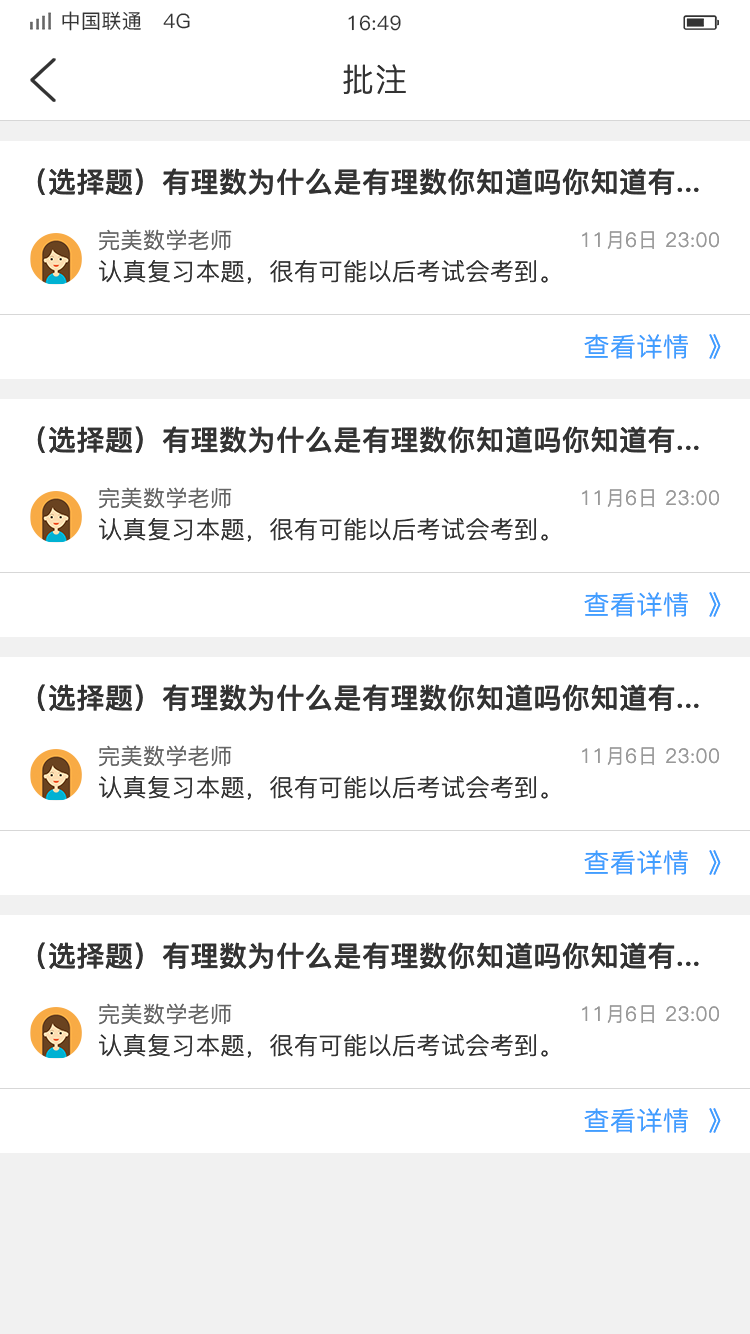
<style>
.page{position:relative;width:750px;height:1334px;background:#ffffff}
.page>*{position:absolute;margin:0}
.t1{font:20px "PingFang-SC-Medium";letter-spacing:0.02em;color:#333333}
.t2{font:32px "PingFang-SC-Regular";letter-spacing:0.02em;color:#333333}
.t3{font:28px "PingFang-SC-Bold";letter-spacing:0.02em;color:#333333}
.t4{font:22px "PingFang-SC-Regular";letter-spacing:0.02em;color:#666666}
.t5{font:20px "PingFang-SC-Regular";letter-spacing:0.02em;color:#999999}
.t6{font:24px "PingFang-SC-Regular";letter-spacing:0.02em;color:#333333}
.t7{font:26px "PingFang-SC-Regular";letter-spacing:0.02em;color:#409eff}
</style>
<div class="page">
<p class="t1" style="left:62px;top:11px;width:128px;height:20px">中国联通   4G</p>
<p class="t1" style="left:348px;top:15px;width:53px;height:16px">16:49</p>
<p class="t2" style="left:343px;top:64px;width:63px;height:30px">批注</p>
<p class="t3" style="left:37px;top:168px;width:662px;height:27px">（选择题）有理数为什么是有理数你知道吗你知道有...</p>
<p class="t4" style="left:99px;top:229px;width:133px;height:22px">完美数学老师</p>
<p class="t5" style="left:582px;top:231px;width:137px;height:18px">11月6日 23:00</p>
<p class="t6" style="left:99px;top:260px;width:449px;height:24px">认真复习本题，很有可能以后考试会考到。</p>
<p class="t7" style="left:584px;top:334px;width:137px;height:25px">查看详情  》</p>
<p class="t3" style="left:37px;top:426px;width:662px;height:27px">（选择题）有理数为什么是有理数你知道吗你知道有...</p>
<p class="t4" style="left:99px;top:487px;width:133px;height:22px">完美数学老师</p>
<p class="t5" style="left:582px;top:489px;width:137px;height:18px">11月6日 23:00</p>
<p class="t6" style="left:99px;top:518px;width:449px;height:24px">认真复习本题，很有可能以后考试会考到。</p>
<p class="t7" style="left:584px;top:592px;width:137px;height:25px">查看详情  》</p>
<p class="t3" style="left:37px;top:684px;width:662px;height:27px">（选择题）有理数为什么是有理数你知道吗你知道有...</p>
<p class="t4" style="left:99px;top:745px;width:133px;height:22px">完美数学老师</p>
<p class="t5" style="left:582px;top:747px;width:137px;height:18px">11月6日 23:00</p>
<p class="t6" style="left:99px;top:776px;width:449px;height:24px">认真复习本题，很有可能以后考试会考到。</p>
<p class="t7" style="left:584px;top:850px;width:137px;height:25px">查看详情  》</p>
<p class="t3" style="left:37px;top:942px;width:662px;height:27px">（选择题）有理数为什么是有理数你知道吗你知道有...</p>
<p class="t4" style="left:99px;top:1003px;width:133px;height:22px">完美数学老师</p>
<p class="t5" style="left:582px;top:1005px;width:137px;height:18px">11月6日 23:00</p>
<p class="t6" style="left:99px;top:1034px;width:449px;height:24px">认真复习本题，很有可能以后考试会考到。</p>
<p class="t7" style="left:584px;top:1108px;width:137px;height:25px">查看详情  》</p>
</div>
